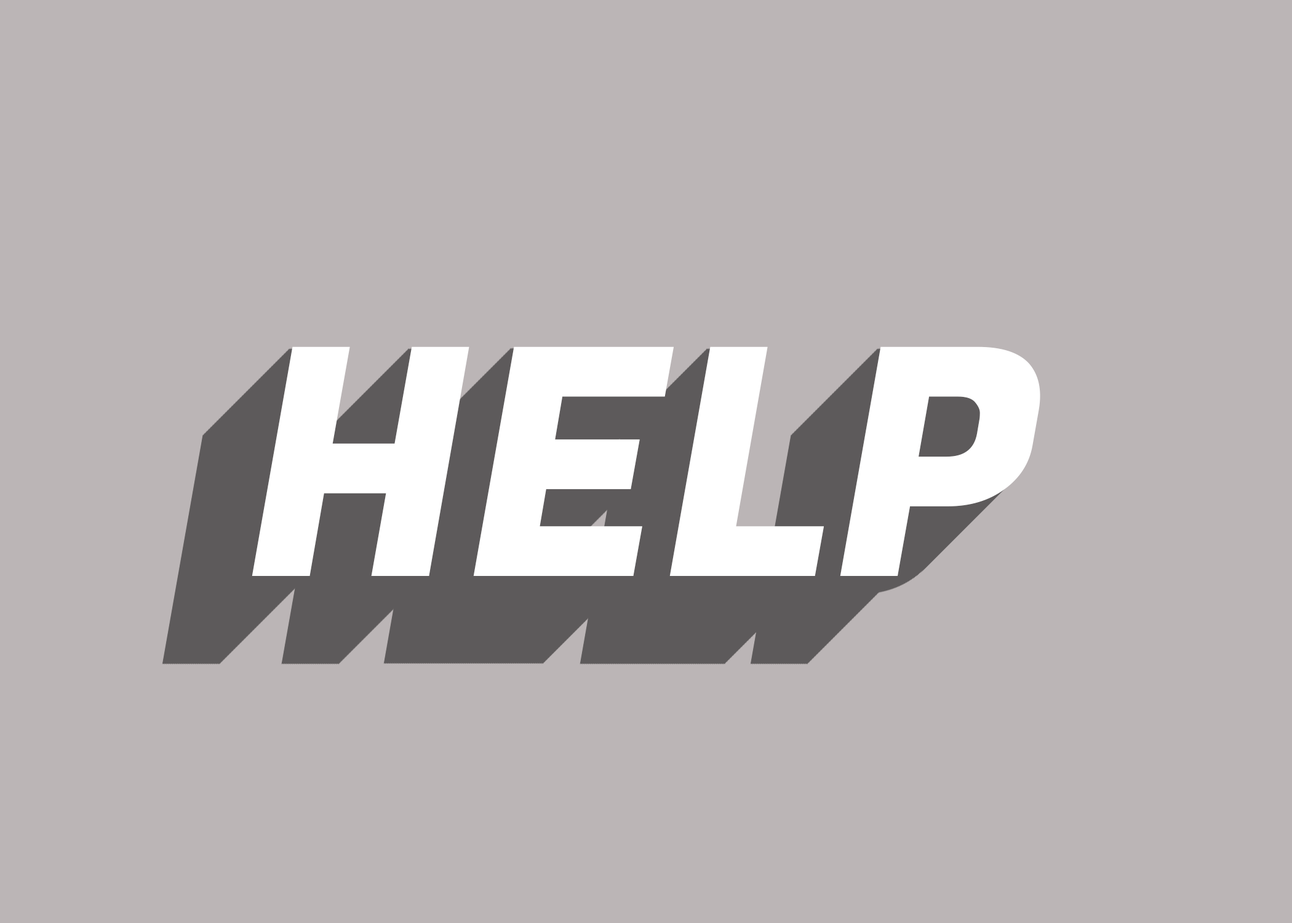
<style>
.page{position:relative;width:1292px;height:923px;background:#bbb5b6}
.page>*{position:absolute;margin:0}
.t1{font:317.9px "FugazOne-Regular";color:#ffffff}
</style>
<div class="page">
<p class="t1" style="left:252px;top:346px;width:788px;height:230px">HELP</p>
</div>
